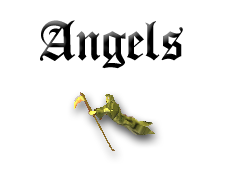
<style>
.page{position:relative;width:230px;height:195px;background:#ffffff}
.page>*{position:absolute;margin:0}
.t1{font:60px "Oldchristmas-Regular";color:#000000}
</style>
<div class="page">
<p class="t1" style="left:40px;top:20px;width:143px;height:49px">Angels</p>
</div>
